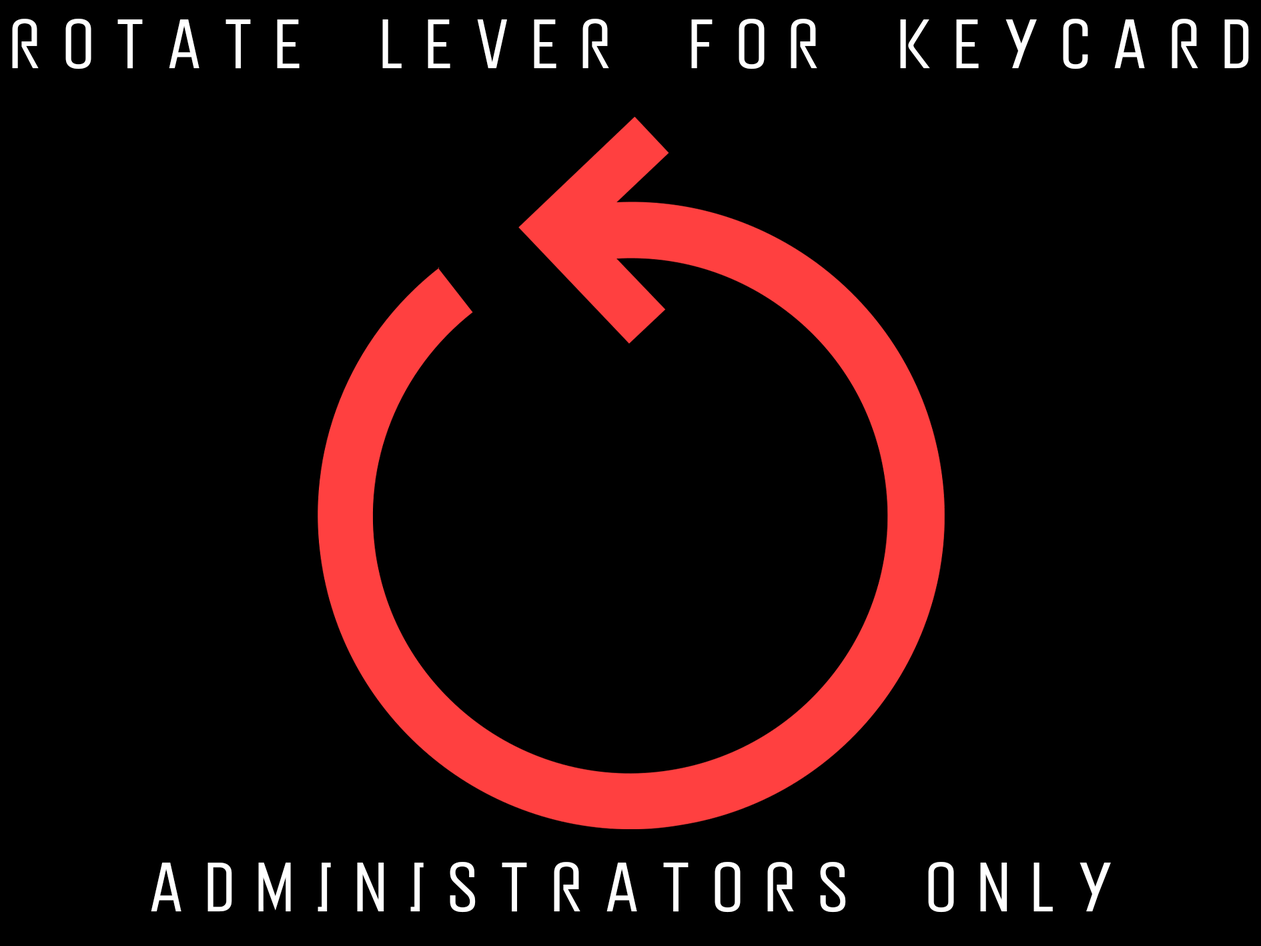
<style>
.page{position:relative;width:1261px;height:946px;background:#000000}
.page>*{position:absolute;margin:0}
.t1{font:69.5px "PeytonDisplay-ExtraLight";letter-spacing:0.28em;color:#ffffff}
</style>
<div class="page">
<p class="t1" style="left:12px;top:19px;width:1237px;height:50px">ROTATE LEVER FOR KEYCARD</p>
<p class="t1" style="left:151px;top:861px;width:960px;height:51px">ADMINISTRATORS ONLY</p>
</div>
